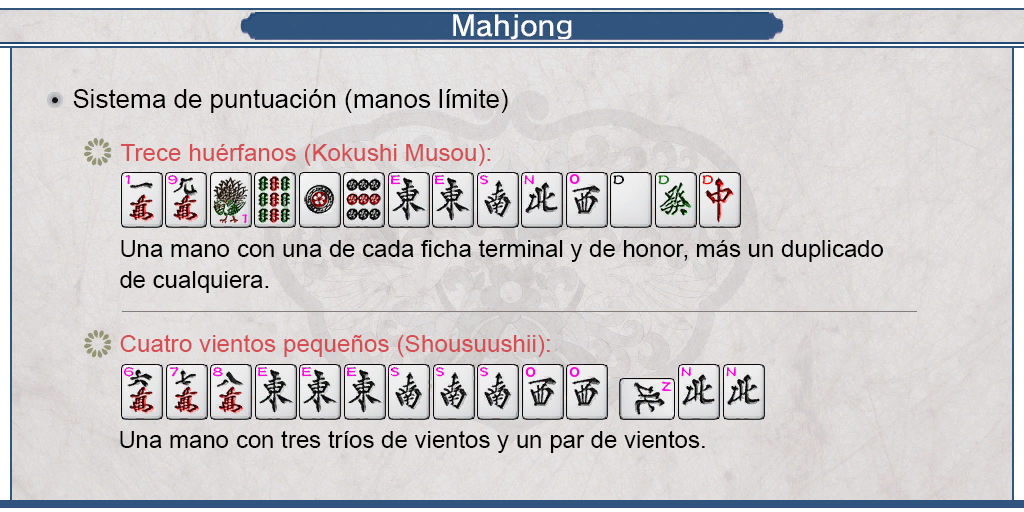
<style>
.page{position:relative;width:1024px;height:512px}
.page>*{position:absolute;margin:0}
.t1{font:26px "ArialMT";color:#000000}
.t2{font:24px "ArialMT";color:#d64d52}
.t3{font:24px/31px "ArialMT";color:#000000}
.t4{font:24px "ArialMT";color:#000000}
</style>
<div class="page">
<p class="t1" style="left:73px;top:89px;width:435px;height:24px">Sistema de puntuación (manos límite)</p>
<p class="t2" style="left:120px;top:144px;width:371px;height:22px">Trece huérfanos (Kokushi Musou):</p>
<p class="t3" style="left:120px;top:239px;width:764px;height:54px;text-align:justify">Una mano con una de cada ficha terminal y de honor, más un duplicado <br>de cualquiera.</p>
<p class="t2" style="left:120px;top:334px;width:430px;height:23px">Cuatro vientos pequeños (Shousuushii):</p>
<p class="t4" style="left:120px;top:430px;width:585px;height:23px">Una mano con tres tríos de vientos y un par de vientos.</p>
</div>
